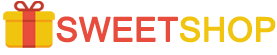
<style>
.page{position:relative;width:277px;height:55px;background:#ffffff}
.page>*{position:absolute;margin:0}
.t1{font:36px "Shruti";color:#e74c3c;font-weight:bold}
.t2{font:36px "Shruti";color:#f1c40f;font-weight:bold}
</style>
<div class="page">
<p class="t1" style="left:56px;top:16px;width:220px;height:27px">SWEET<span class="t2">SHOP</span></p>
</div>
